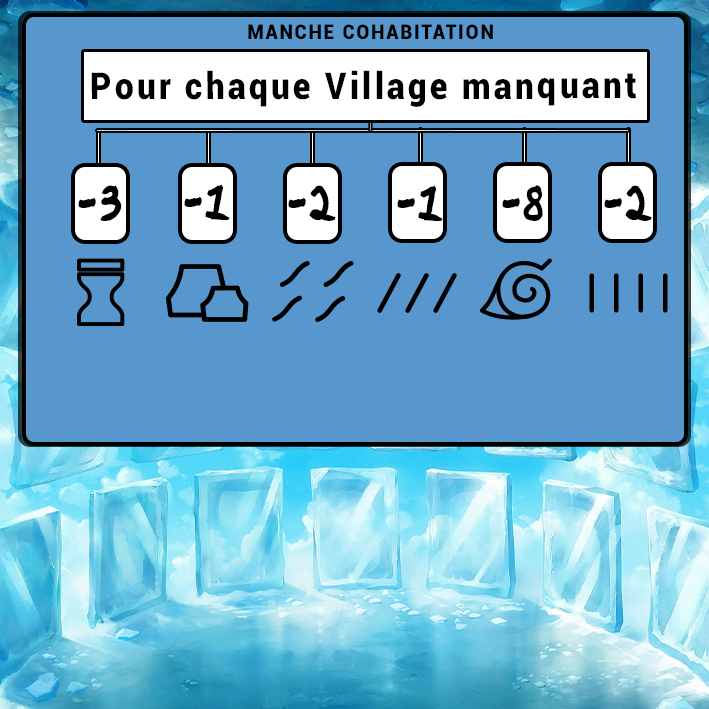
<style>
.page{position:relative;width:709px;height:709px;background:#5897cd}
.page>*{position:absolute;margin:0}
.t1{font:20.8px "Roboto-Black";letter-spacing:0.1em;color:#000000;scale:0.9 1}
.t2{font:36.9px "Roboto-Black";letter-spacing:0.1em;color:#000000;scale:0.9 1}
.t3{font:39.3px "Ninja-Naruto";letter-spacing:0.1em;color:#000000;scale:0.9 1}
</style>
<div class="page">
<p class="t1" style="left:248px;top:24px;width:245px;height:15px">MANCHE COHABITATION</p>
<p class="t2" style="left:91px;top:70px;width:545px;height:37px">Pour chaque Village manquant</p>
<p class="t3" style="left:78px;top:185px;width:44px;height:36px">-3</p>
<p class="t3" style="left:184px;top:184px;width:46px;height:36px">-1</p>
<p class="t3" style="left:288px;top:185px;width:48px;height:36px">-2</p>
<p class="t3" style="left:397px;top:185px;width:46px;height:36px">-1</p>
<p class="t3" style="left:502px;top:185px;width:41px;height:36px">-8</p>
<p class="t3" style="left:604px;top:185px;width:48px;height:36px">-2</p>
</div>
